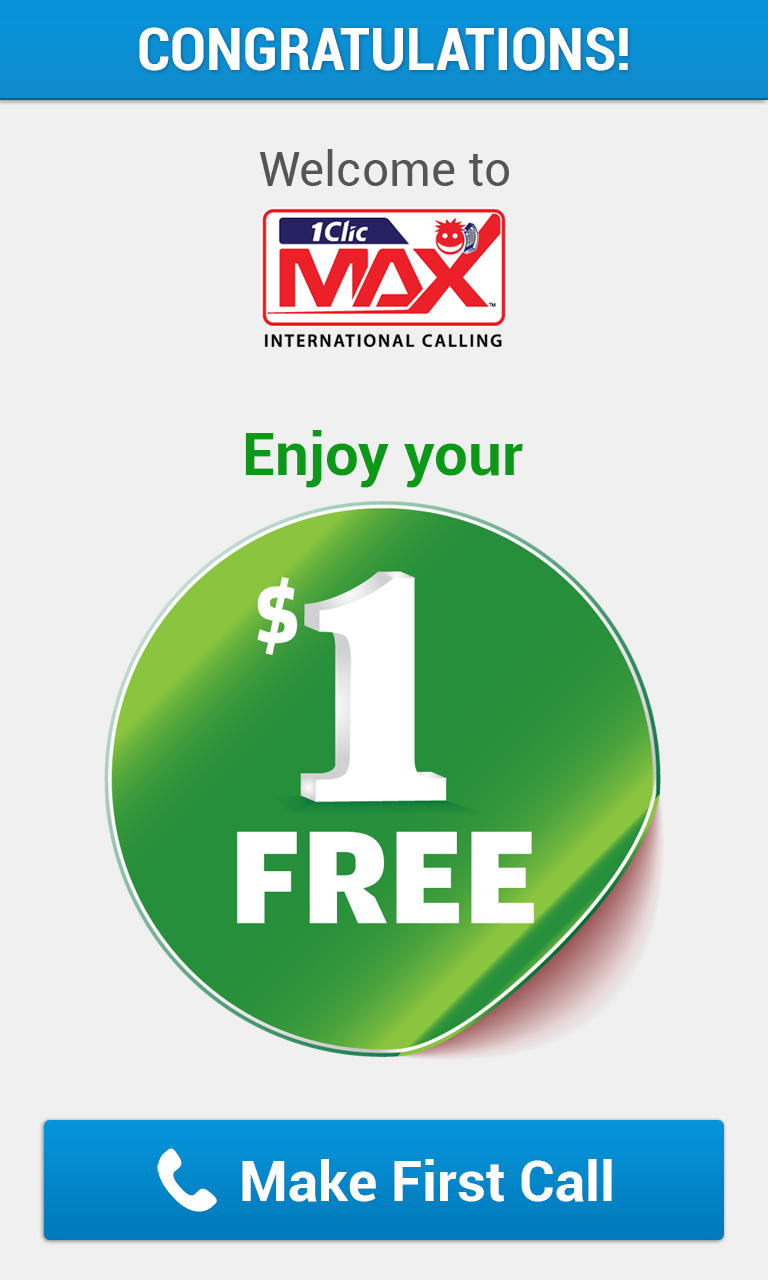
<style>
.page{position:relative;width:768px;height:1280px;background:#f0f0f0}
.page>*{position:absolute;margin:0}
.t1{font:60px "Roboto-BoldCondensed";color:#ffffff}
.t2{font:48px "Roboto-Regular";color:#555555}
.t3{font:60px "Roboto-Bold";color:#0c9918}
.t4{font:56px "Roboto-Bold";color:#ffffff}
</style>
<div class="page">
<p class="t1" style="left:139px;top:27px;width:489px;height:44px">CONGRATULATIONS!</p>
<p class="t2" style="left:259px;top:149px;width:250px;height:37px">Welcome to</p>
<p class="t3" style="left:245px;top:430px;width:278px;height:58px">Enjoy your</p>
<p class="t4" style="left:242px;top:1159px;width:370px;height:43px">Make First Call</p>
</div>
